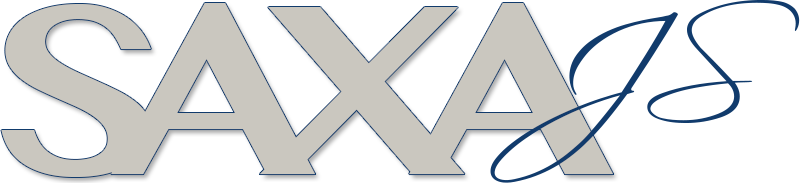
<style>
.page{position:relative;width:800px;height:183px;background:#ffffff}
.page>*{position:absolute;margin:0}
.t1{font:240px "TamilMN-Bold";letter-spacing:-0.2em;color:#cac7bf;scale:1.15 1}
.t2{font:144px "Scriptina";letter-spacing:0.02em;color:#113b6c;scale:1.24 1}
</style>
<div class="page">
<p class="t1" style="left:1px;top:3px;width:613px;height:174px">SAXA</p>
<p class="t2" style="left:490px;top:0px;width:310px;height:183px">JS</p>
</div>
